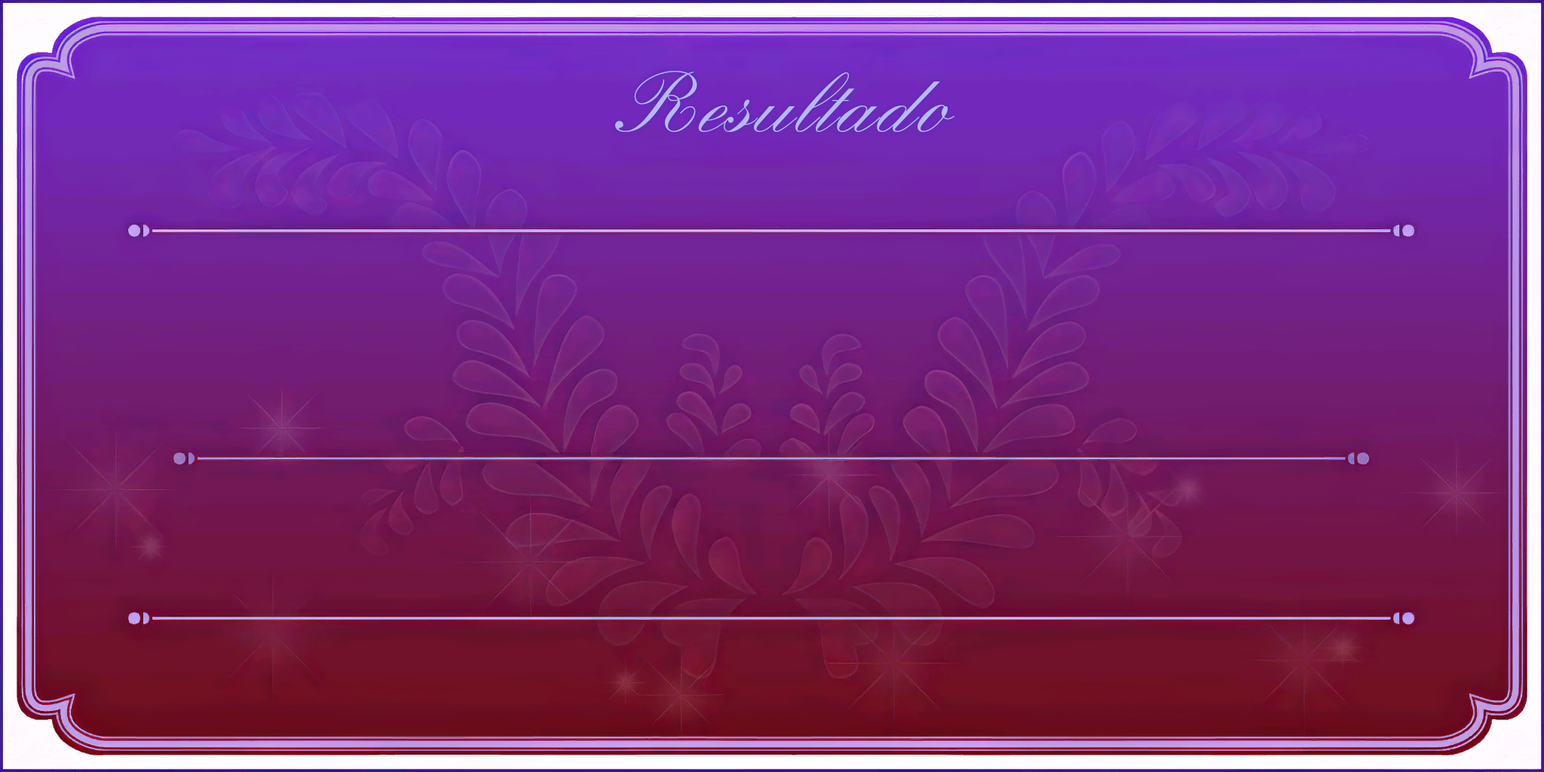
<style>
.page{position:relative;width:1544px;height:772px}
.page>*{position:absolute;margin:0}
.t1{font:82.8px "KuenstlerScript-Medium";color:#b5baf7}
</style>
<div class="page">
<p class="t1" style="left:615px;top:71px;width:340px;height:61px">Resultado</p>
</div>
